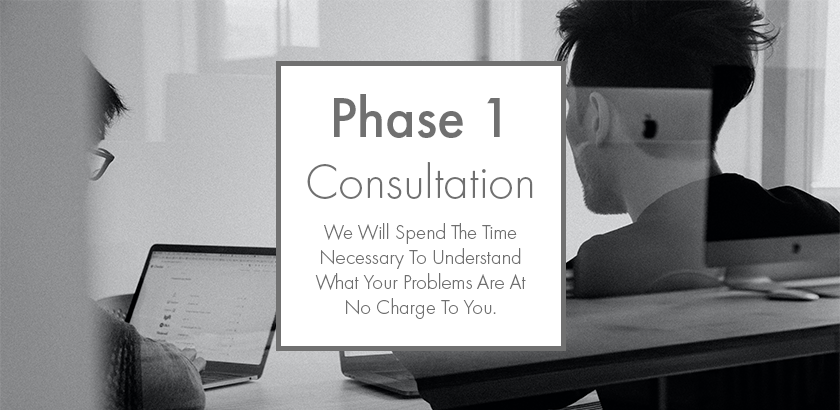
<style>
.page{position:relative;width:840px;height:410px;background:#ffffff}
.page>*{position:absolute;margin:0}
.t1{font:58.3px "FuturaPT-Medium";color:#707070}
.t2{font:50px "FuturaPT-Light";color:#707070}
.t3{font:20.8px "FuturaPT-Light";color:#707070}
</style>
<div class="page">
<p class="t1" style="left:334px;top:94px;width:166px;height:44px">Phase 1</p>
<p class="t2" style="left:307px;top:162px;width:226px;height:37px">Consultation</p>
<p class="t3" style="left:315px;top:223px;width:211px;height:96px;text-align:center">We Will Spend The Time Necessary To Understand What Your Problems Are At No Charge To You.</p>
</div>
